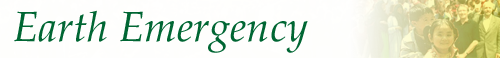
<style>
.page{position:relative;width:500px;height:58px;background:#fefefd}
.page>*{position:absolute;margin:0}
.t1{font:42px "PalatinoLinotype-Italic";color:#006633}
</style>
<div class="page">
<p class="t1" style="left:14px;top:10px;width:294px;height:43px">Earth Emergency</p>
</div>
